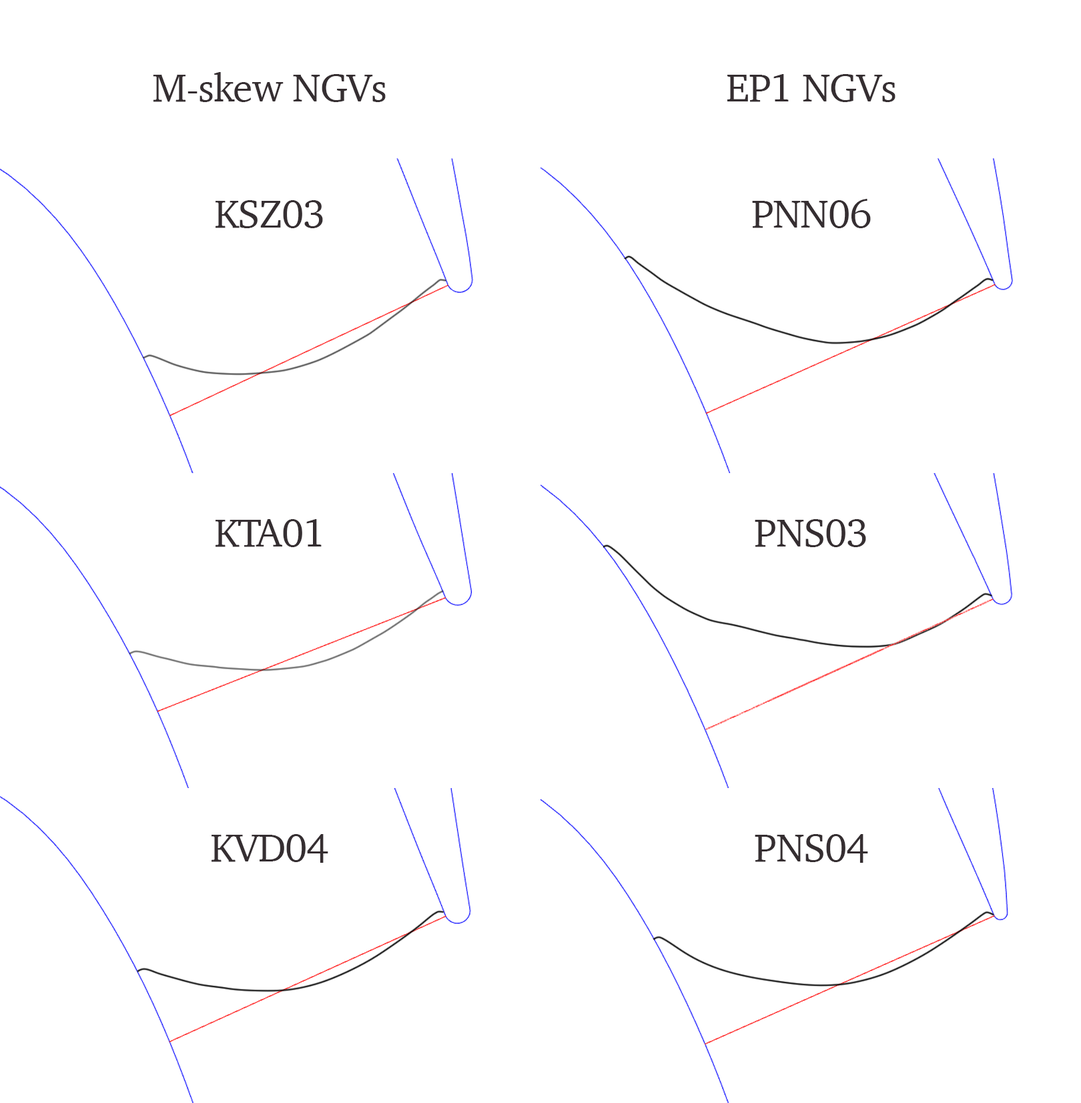
<style>
.page{position:relative;width:1081px;height:1103px;background:#ffffff}
.page>*{position:absolute;margin:0}
.t1{font:40px "Charter-Roman";letter-spacing:-0.02em;color:#352e31}
</style>
<div class="page">
<p class="t1" style="left:153px;top:72px;width:233px;height:30px">M-skew NGVs</p>
<p class="t1" style="left:727px;top:74px;width:169px;height:28px">EP1 NGVs</p>
<p class="t1" style="left:216px;top:200px;width:107px;height:28px">KSZ03</p>
<p class="t1" style="left:752px;top:199px;width:119px;height:29px">PNN06</p>
<p class="t1" style="left:216px;top:519px;width:106px;height:28px">KTA01</p>
<p class="t1" style="left:755px;top:519px;width:111px;height:28px">PNS03</p>
<p class="t1" style="left:212px;top:834px;width:116px;height:29px">KVD04</p>
<p class="t1" style="left:755px;top:834px;width:113px;height:29px">PNS04</p>
</div>
